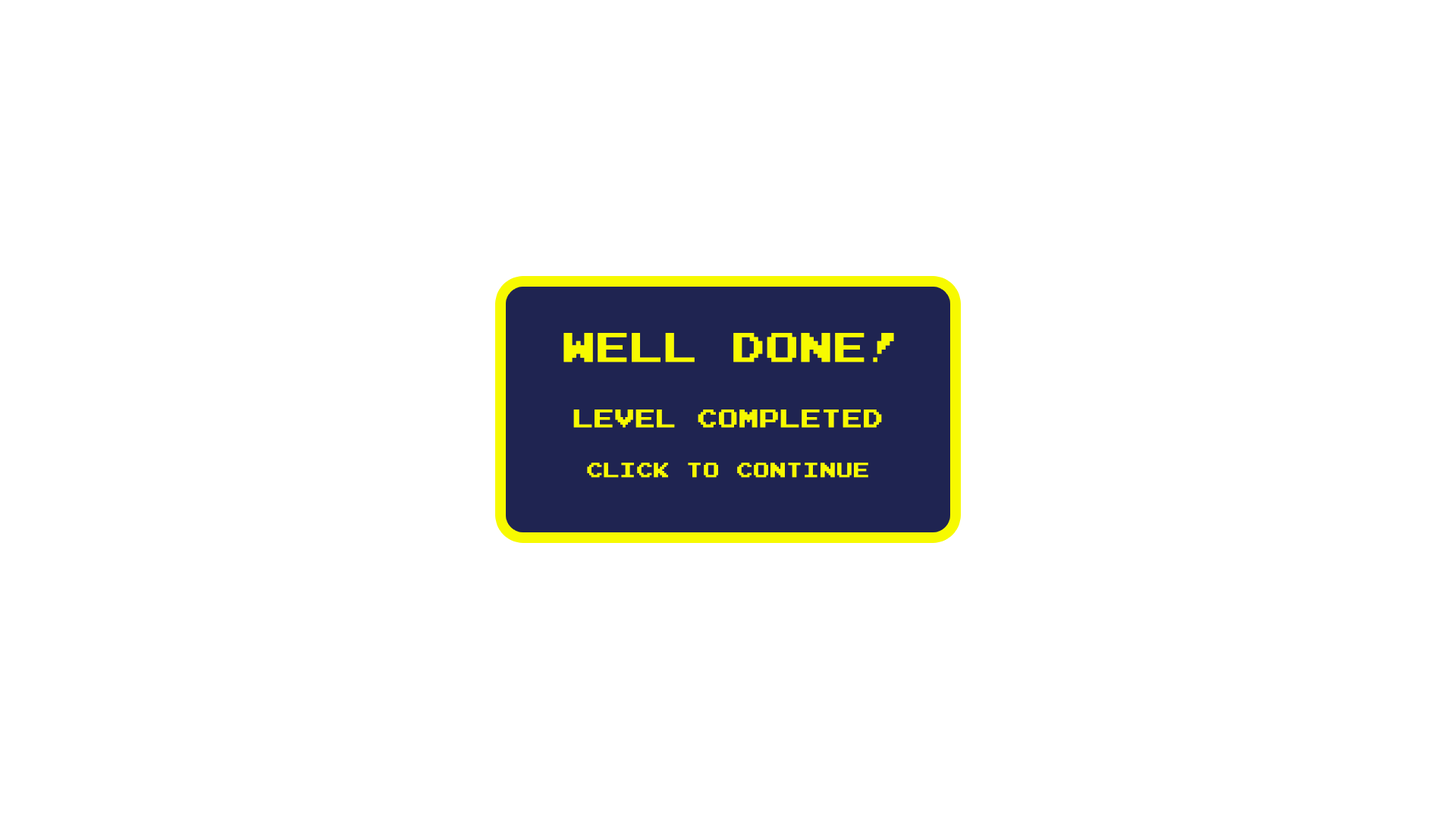
<style>
.page{position:relative;width:1456px;height:819px;background:#ffffff}
.page>*{position:absolute;margin:0}
.t1{font:40.9px "JoystixMonospace-Regular";color:#f7fa00}
.t2{font:25px "JoystixMonospace-Regular";color:#f7fa00}
.t3{font:20.1px "JoystixMonospace-Regular";color:#f7fa00}
</style>
<div class="page">
<p class="t1" style="left:563px;top:333px;width:331px;height:29px">Well done!</p>
<p class="t2" style="left:573px;top:409px;width:309px;height:19px">LEVEL COMPLETED</p>
<p class="t3" style="left:587px;top:463px;width:281px;height:15px">CLICK TO CONTINUE</p>
</div>
